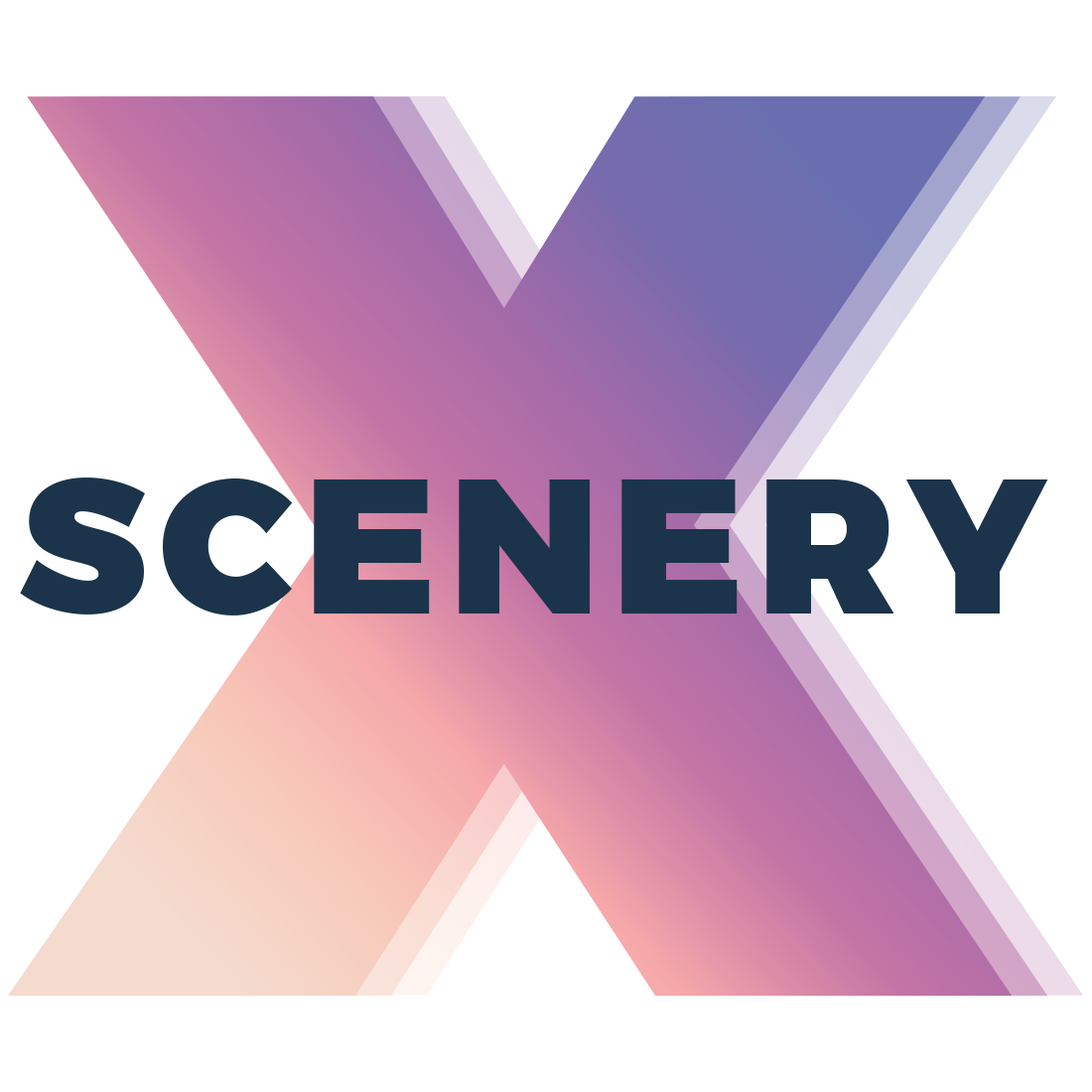
<style>
.page{position:relative;width:1092px;height:1092px;background:#ffffff}
.page>*{position:absolute;margin:0}
.t1{font:191.2px "Montserrat-Black";letter-spacing:0.07em;color:#1b344b;text-transform:uppercase}
</style>
<div class="page">
<p class="t1" style="left:20px;top:477px;width:1028px;height:138px">SCENERY</p>
</div>
